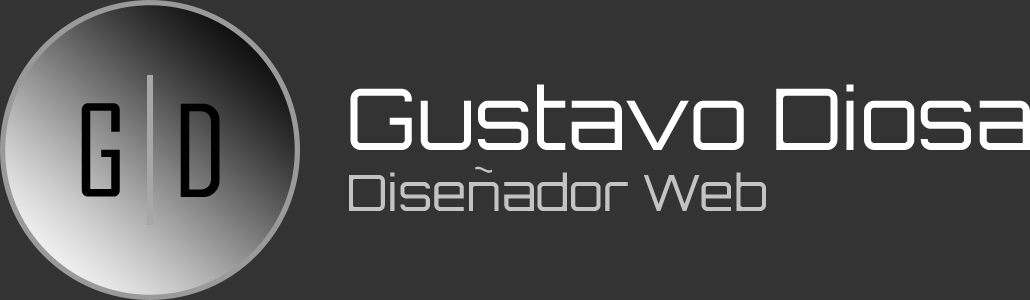
<style>
.page{position:relative;width:1030px;height:300px;background:#333333}
.page>*{position:absolute;margin:0}
.t1{font:85px "Orbitron-Regular";color:#ffffff}
.t2{font:50px "Orbitron-Regular";color:#c3c3c3}
</style>
<div class="page">
<p class="t1" style="left:350px;top:84px;width:680px;height:66px">Gustavo Diosa</p>
<p class="t2" style="left:349px;top:166px;width:417px;height:45px">Diseñador Web</p>
</div>
